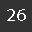
<style>
.page{position:relative;width:32px;height:32px;background:#333333}
.page>*{position:absolute;margin:0}
.t1{font:17.8px "MyriadPro-Regular";color:#ffffff;scale:1.12 1}
</style>
<div class="page">
<p class="t1" style="left:7px;top:9px;width:19px;height:12px">26</p>
</div>
